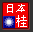
<style>
.page{position:relative;width:33px;height:32px;background:#f20000}
.page>*{position:absolute;margin:0}
.t1{font:10.4px "SimSun";color:#ffffff}
.t2{font:11.7px "SimSun";color:#ffffff}
</style>
<div class="page">
<p class="t1" style="left:7px;top:4px;width:18px;height:9px">日本</p>
<p class="t2" style="left:16px;top:15px;width:11px;height:12px">桂</p>
</div>
